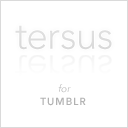
<style>
.page{position:relative;width:128px;height:128px;background:#ffffff}
.page>*{position:absolute;margin:0}
.t1{font:38.4px "AvenirLTStd-Light";color:#dcdcdc}
.t2{font:10px "AvenirLTStd-LightOblique"}
.t3{font:10px "AvenirLTStd-Heavy";letter-spacing:0.1em;color:#b2b2b2}
</style>
<div class="page">
<p class="t1" style="left:15px;top:25px;width:97px;height:25px">tersus</p>
<p class="t2" style="left:58px;top:84px;width:13px;height:9px">for</p>
<p class="t3" style="left:40px;top:97px;width:46px;height:9px">TUMBLR</p>
</div>
